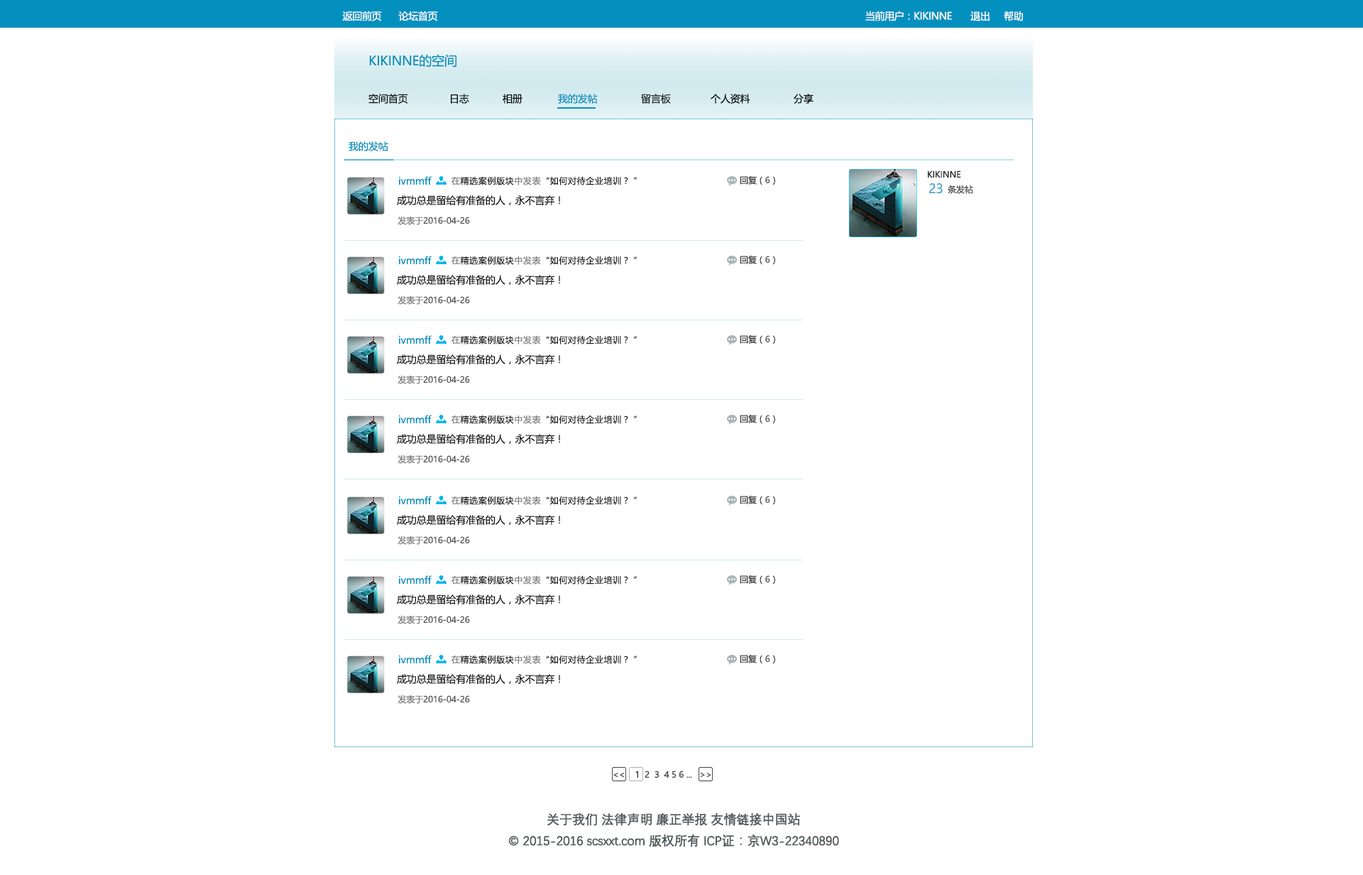
<style>
.page{position:relative;width:1363px;height:875px;background:#ffffff}
.page>*{position:absolute;margin:0}
.t1{font:9.9px "MicrosoftYaHei";letter-spacing:-0.025em;color:#ffffff}
.t2{font:12.8px "MicrosoftYaHei";letter-spacing:-0.01em;color:#0390bf}
.t3{font:9.9px "MicrosoftYaHei";letter-spacing:-0.01em;color:#111111}
.t4{font:9.9px "MicrosoftYaHei";letter-spacing:-0.01em;color:#040404}
.t5{font:9.9px "MicrosoftYaHei";letter-spacing:-0.01em;color:#0390bf}
.t6{font:9.9px "MicrosoftYaHei";letter-spacing:-0.01em;color:#1f1f1f}
.t7{font:8.5px "MicrosoftYaHei";letter-spacing:-0.01em;color:#1a1b1b}
.t8{font:8.5px "MicrosoftYaHei";letter-spacing:0.05em;color:#1a1a19}
.t9{font:8.5px "MicrosoftYaHei";letter-spacing:0.05em;color:#7f7d7d}
.t10{font:8.5px "MicrosoftYaHei";letter-spacing:0.05em;color:#1b1b1a}
.t11{font:8.5px "MicrosoftYaHei";letter-spacing:-0.01em;color:#2e2d2d}
.t12{font:8.5px "MicrosoftYaHei";letter-spacing:-0.01em;color:#535353}
.t13{font:12.8px "MicrosoftYaHei";letter-spacing:-0.01em;color:#4ea5ca}
.t14{font:8.5px "MicrosoftYaHei";letter-spacing:-0.01em;color:#454646}
.t15{font:9.9px "MicrosoftYaHei";letter-spacing:-0.01em;color:#1a1a1a}
.t16{font:8.5px "MicrosoftYaHei";letter-spacing:-0.01em;color:#7a7a7a}
.t17{font:8.5px "MicrosoftYaHei";letter-spacing:-0.01em;color:#38393a}
.t18{font:8.5px "MicrosoftYaHei";letter-spacing:-0.01em;color:#252626}
.t19{font:12.8px/21.3px "DengXian-Regular";letter-spacing:-0.025em;color:#545a5c;font-weight:bold}
</style>
<div class="page">
<p class="t1" style="left:342px;top:11px;width:40px;height:10px">返回前页</p>
<p class="t1" style="left:398px;top:11px;width:40px;height:10px">论坛首页</p>
<p class="t1" style="left:865px;top:11px;width:87px;height:10px">当前用户：KIKINNE</p>
<p class="t1" style="left:971px;top:11px;width:19px;height:10px">退出</p>
<p class="t1" style="left:1004px;top:11px;width:19px;height:10px">帮助</p>
<p class="t2" style="left:369px;top:54px;width:88px;height:13px">KIKINNE的空间</p>
<p class="t3" style="left:368px;top:94px;width:40px;height:10px">空间首页</p>
<p class="t4" style="left:451px;top:94px;width:18px;height:10px">日志</p>
<p class="t4" style="left:503px;top:94px;width:20px;height:10px">相册</p>
<p class="t5" style="left:558px;top:94px;width:40px;height:10px">我的发帖</p>
<p class="t6" style="left:641px;top:94px;width:30px;height:10px">留言板</p>
<p class="t4" style="left:711px;top:94px;width:39px;height:10px">个人资料</p>
<p class="t4" style="left:794px;top:94px;width:20px;height:10px">分享</p>
<p class="t5" style="left:349px;top:141px;width:39px;height:10px">我的发帖</p>
<p class="t7" style="left:928px;top:170px;width:33px;height:8px">KIKINNE</p>
<p class="t5" style="left:399px;top:176px;width:33px;height:9px">ivmmff</p>
<p class="t8" style="left:452px;top:176px;width:185px;height:9px"><span class="t9">在</span><span class="t10">精选案例版块</span><span class="t9">中发表</span>“如何对待企业培训？ ”</p>
<p class="t11" style="left:740px;top:175px;width:35px;height:10px">回复（<span class="t12">6</span>）</p>
<p class="t13" style="left:929px;top:183px;width:14px;height:11px">23</p>
<p class="t14" style="left:948px;top:185px;width:25px;height:9px">条发帖</p>
<p class="t15" style="left:397px;top:195px;width:163px;height:10px">成功总是留给有准备的人，永不言弃！</p>
<p class="t12" style="left:398px;top:216px;width:72px;height:9px"><span class="t16"> 发表于</span>2016-04-26</p>
<p class="t5" style="left:399px;top:256px;width:33px;height:8px">ivmmff</p>
<p class="t8" style="left:452px;top:256px;width:185px;height:9px"><span class="t9">在</span><span class="t10">精选案例版块</span><span class="t9">中发表</span>“如何对待企业培训？ ”</p>
<p class="t11" style="left:740px;top:255px;width:35px;height:10px">回复（<span class="t12">6</span>）</p>
<p class="t15" style="left:397px;top:275px;width:163px;height:10px">成功总是留给有准备的人，永不言弃！</p>
<p class="t12" style="left:398px;top:295px;width:72px;height:10px"><span class="t16"> 发表于</span>2016-04-26</p>
<p class="t5" style="left:399px;top:335px;width:33px;height:9px">ivmmff</p>
<p class="t8" style="left:452px;top:335px;width:185px;height:9px"><span class="t9">在</span><span class="t10">精选案例版块</span><span class="t9">中发表</span>“如何对待企业培训？ ”</p>
<p class="t11" style="left:740px;top:334px;width:35px;height:10px">回复（<span class="t12">6</span>）</p>
<p class="t15" style="left:397px;top:354px;width:163px;height:10px">成功总是留给有准备的人，永不言弃！</p>
<p class="t12" style="left:398px;top:375px;width:72px;height:9px"><span class="t16"> 发表于</span>2016-04-26</p>
<p class="t11" style="left:740px;top:414px;width:35px;height:10px">回复（<span class="t12">6</span>）</p>
<p class="t5" style="left:399px;top:415px;width:33px;height:8px">ivmmff</p>
<p class="t8" style="left:452px;top:415px;width:185px;height:9px"><span class="t9">在</span><span class="t10">精选案例版块</span><span class="t9">中发表</span>“如何对待企业培训？ ”</p>
<p class="t15" style="left:397px;top:434px;width:163px;height:10px">成功总是留给有准备的人，永不言弃！</p>
<p class="t12" style="left:398px;top:454px;width:72px;height:10px"><span class="t16"> 发表于</span>2016-04-26</p>
<p class="t5" style="left:399px;top:496px;width:33px;height:8px">ivmmff</p>
<p class="t8" style="left:452px;top:496px;width:185px;height:9px"><span class="t9">在</span><span class="t10">精选案例版块</span><span class="t9">中发表</span>“如何对待企业培训？ ”</p>
<p class="t11" style="left:740px;top:495px;width:35px;height:10px">回复（<span class="t12">6</span>）</p>
<p class="t15" style="left:397px;top:515px;width:163px;height:10px">成功总是留给有准备的人，永不言弃！</p>
<p class="t12" style="left:398px;top:535px;width:72px;height:10px"><span class="t16"> 发表于</span>2016-04-26</p>
<p class="t5" style="left:399px;top:575px;width:33px;height:9px">ivmmff</p>
<p class="t8" style="left:452px;top:575px;width:185px;height:9px"><span class="t9">在</span><span class="t10">精选案例版块</span><span class="t9">中发表</span>“如何对待企业培训？ ”</p>
<p class="t11" style="left:740px;top:574px;width:35px;height:10px">回复（<span class="t12">6</span>）</p>
<p class="t15" style="left:397px;top:594px;width:163px;height:10px">成功总是留给有准备的人，永不言弃！</p>
<p class="t12" style="left:398px;top:615px;width:72px;height:9px"><span class="t16"> 发表于</span>2016-04-26</p>
<p class="t11" style="left:740px;top:654px;width:35px;height:10px">回复（<span class="t12">6</span>）</p>
<p class="t5" style="left:399px;top:655px;width:33px;height:8px">ivmmff</p>
<p class="t8" style="left:452px;top:655px;width:185px;height:9px"><span class="t9">在</span><span class="t10">精选案例版块</span><span class="t9">中发表</span>“如何对待企业培训？ ”</p>
<p class="t15" style="left:397px;top:674px;width:163px;height:10px">成功总是留给有准备的人，永不言弃！</p>
<p class="t12" style="left:398px;top:694px;width:72px;height:10px"><span class="t16"> 发表于</span>2016-04-26</p>
<p class="t17" style="left:613px;top:770px;width:98px;height:8px">&lt;&lt;    1  2 <span class="t18"> 3</span>  4 5 6 ...   &gt;&gt;</p>
<p class="t19" style="left:508px;top:812px;width:331px;height:35px;text-align:center">关于我们 法律声明 廉正举报 友情链接中国站<br>© 2015-2016 scsxxt.com 版权所有 ICP证：京W3-22340890</p>
</div>
